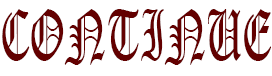
<style>
.page{position:relative;width:272px;height:76px;background:#ffffff}
.page>*{position:absolute;margin:0}
.t1{font:70.3px "OldEnglishTextMT";color:#630000;scale:0.59 1}
</style>
<div class="page">
<p class="t1" style="left:2px;top:9px;width:269px;height:56px">CONTINUE</p>
</div>
